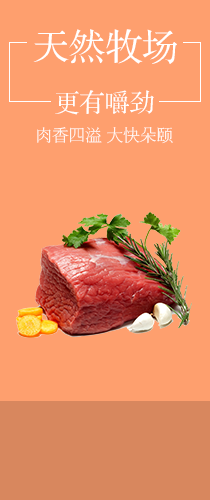
<style>
.page{position:relative;width:210px;height:500px;background:#fe9f6e}
.page>*{position:absolute;margin:0}
.t1{font:36.5px "FZS3JW--GB1-0";color:#ffffff}
.t2{font:25px "FZS3JW--GB1-0";color:#ffffff}
.t3{font:16.7px "FZSYJW--GB1-0";color:#ffffff}
</style>
<div class="page">
<p class="t1" style="left:33px;top:29px;width:144px;height:35px">天然牧场</p>
<p class="t2" style="left:55px;top:90px;width:99px;height:25px">更有嚼劲</p>
<p class="t3" style="left:37px;top:127px;width:136px;height:17px">肉香四溢 大快朵颐</p>
</div>
